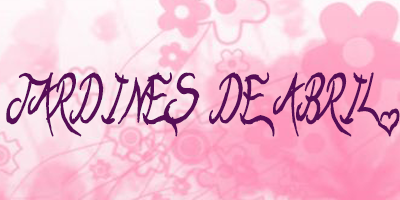
<style>
.page{position:relative;width:400px;height:200px}
.page>*{position:absolute;margin:0}
.t1{font:59.9px "Kiss-Me-Quick";letter-spacing:0.01em;color:#570d57;font-variant:small-caps;font-weight:bold;font-style:italic;scale:0.68 1}
.t2{font:64.1px "Kiss-Me-Quick";color:#570d57;font-variant:small-caps;font-weight:bold;font-style:italic;scale:0.68 1}
</style>
<div class="page">
<p class="t1" style="left:6px;top:72px;width:394px;height:65px"><span class="t2"><br></span>JARDINES DE ABRIL</p>
</div>
